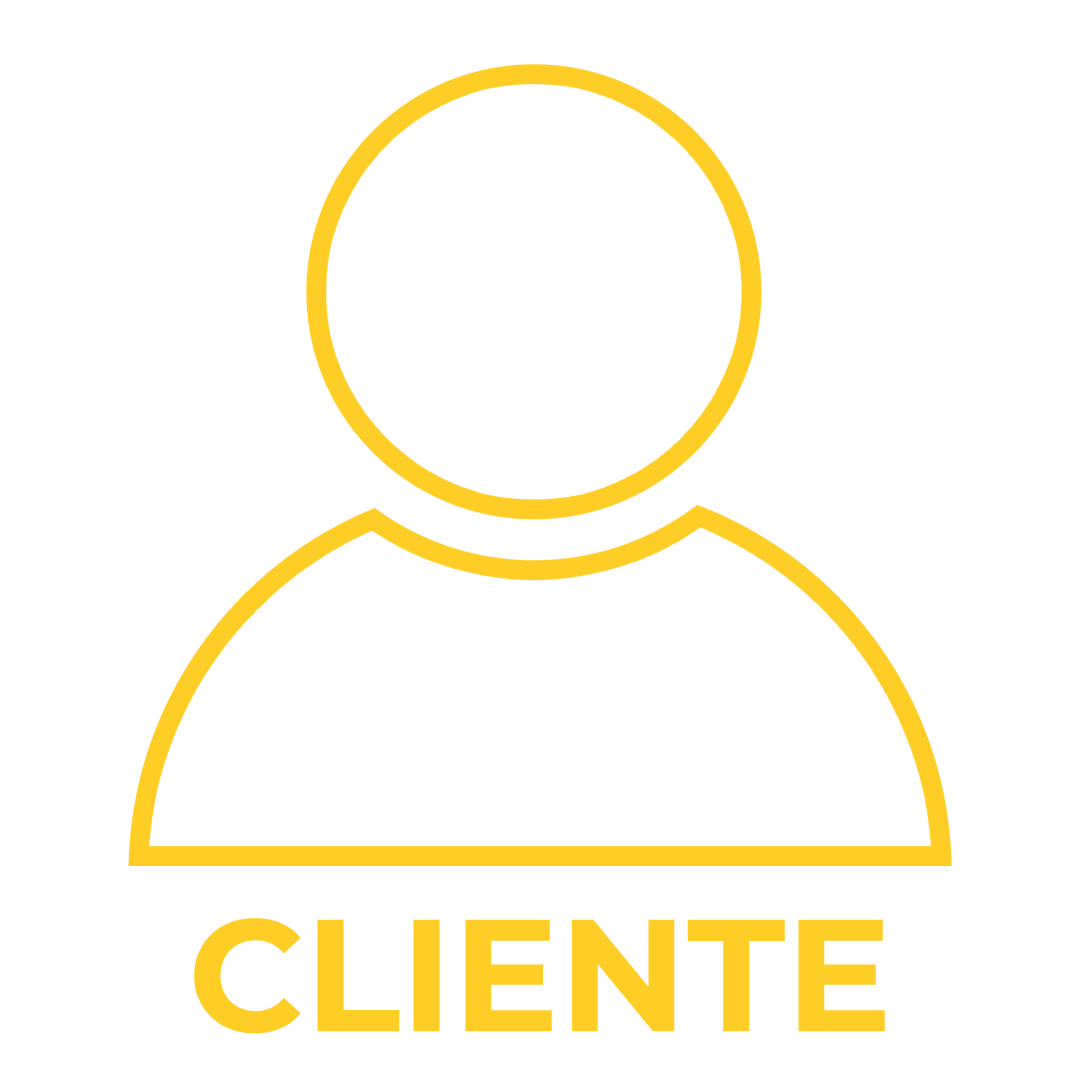
<style>
.page{position:relative;width:1080px;height:1080px;background:#ffffff}
.page>*{position:absolute;margin:0}
.t1{font:158.8px "Montserrat-Bold";color:#fece26;text-transform:uppercase}
</style>
<div class="page">
<p class="t1" style="left:194px;top:918px;width:691px;height:116px">Cliente</p>
</div>
